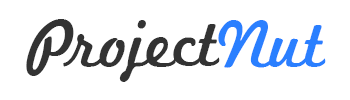
<style>
.page{position:relative;width:350px;height:100px;background:#ffffff}
.page>*{position:absolute;margin:0}
.t1{font:70px "MarketingScript";color:#333333}
.t2{font:70px "MarketingScript";color:#2a7fff}
</style>
<div class="page">
<p class="t1" style="left:26px;top:19px;width:194px;height:63px">Project</p>
<p class="t2" style="left:218px;top:20px;width:108px;height:48px">Nut</p>
</div>
